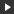
<style>
.page{position:relative;width:14px;height:14px;background:#333333}
.page>*{position:absolute;margin:0}
.t1{font:9px "Seoul-Headline";color:#ffffff}
</style>
<div class="page">
<p class="t1" style="left:5px;top:3px;width:6px;height:8px">▶</p>
</div>
